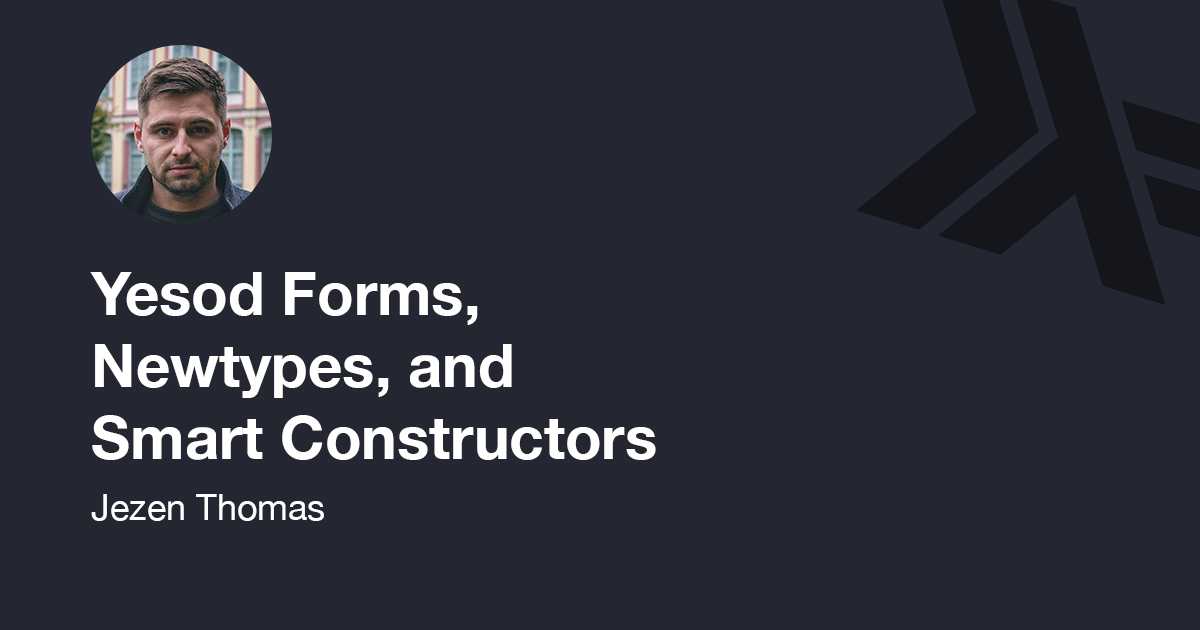
<style>
.page{position:relative;width:1200px;height:630px;background:#242731}
.page>*{position:absolute;margin:0}
.t1{font:60px "HelveticaNeue-Bold";color:#ffffff}
.t2{font:36px "HelveticaNeue";color:#ffffff}
</style>
<div class="page">
<p class="t1" style="left:90px;top:272px;width:566px;height:188px">Yesod Forms, Newtypes, and Smart Constructors</p>
<p class="t2" style="left:91px;top:494px;width:233px;height:27px">Jezen Thomas</p>
</div>
